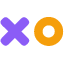
<style>
.page{position:relative;width:64px;height:64px;background:#ffffff}
.page>*{position:absolute;margin:0}
.t1{font:66.7px "Fredoka-SemiBold";color:#8b5cf6}
.t2{font:56px "Fredoka-SemiBold";color:#f59e0b}
</style>
<div class="page">
<p class="t1" style="left:0px;top:17px;width:30px;height:29px">×</p>
<p class="t2" style="left:34px;top:17px;width:30px;height:29px">o</p>
</div>
